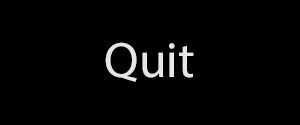
<style>
.page{position:relative;width:300px;height:125px;background:#000000}
.page>*{position:absolute;margin:0}
.t1{font:50px "MyriadPro-Regular";color:#e6e6e6}
</style>
<div class="page">
<p class="t1" style="left:105px;top:42px;width:89px;height:40px">Quit</p>
</div>
